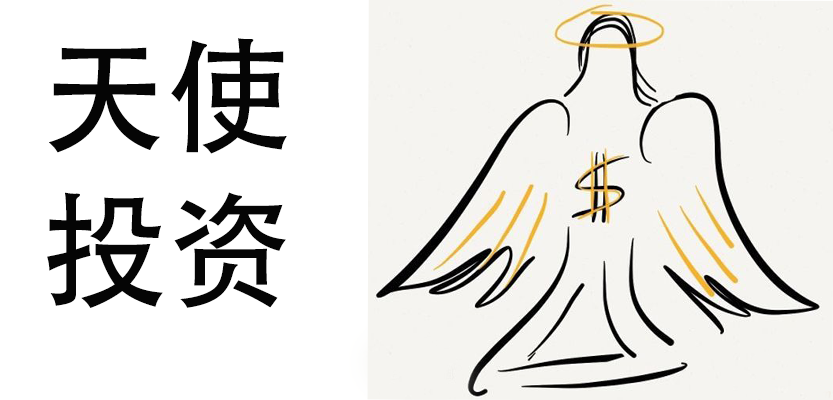
<style>
.page{position:relative;width:833px;height:400px;background:#ffffff}
.page>*{position:absolute;margin:0}
.t1{font:125px "AdobeHeitiStd-Regular";color:#050505}
</style>
<div class="page">
<p class="t1" style="left:49px;top:38px;width:238px;height:116px">天使touzi <br><br>天投资投资投资</p>
<p class="t1" style="left:47px;top:192px;width:239px;height:116px">投资</p>
</div>
